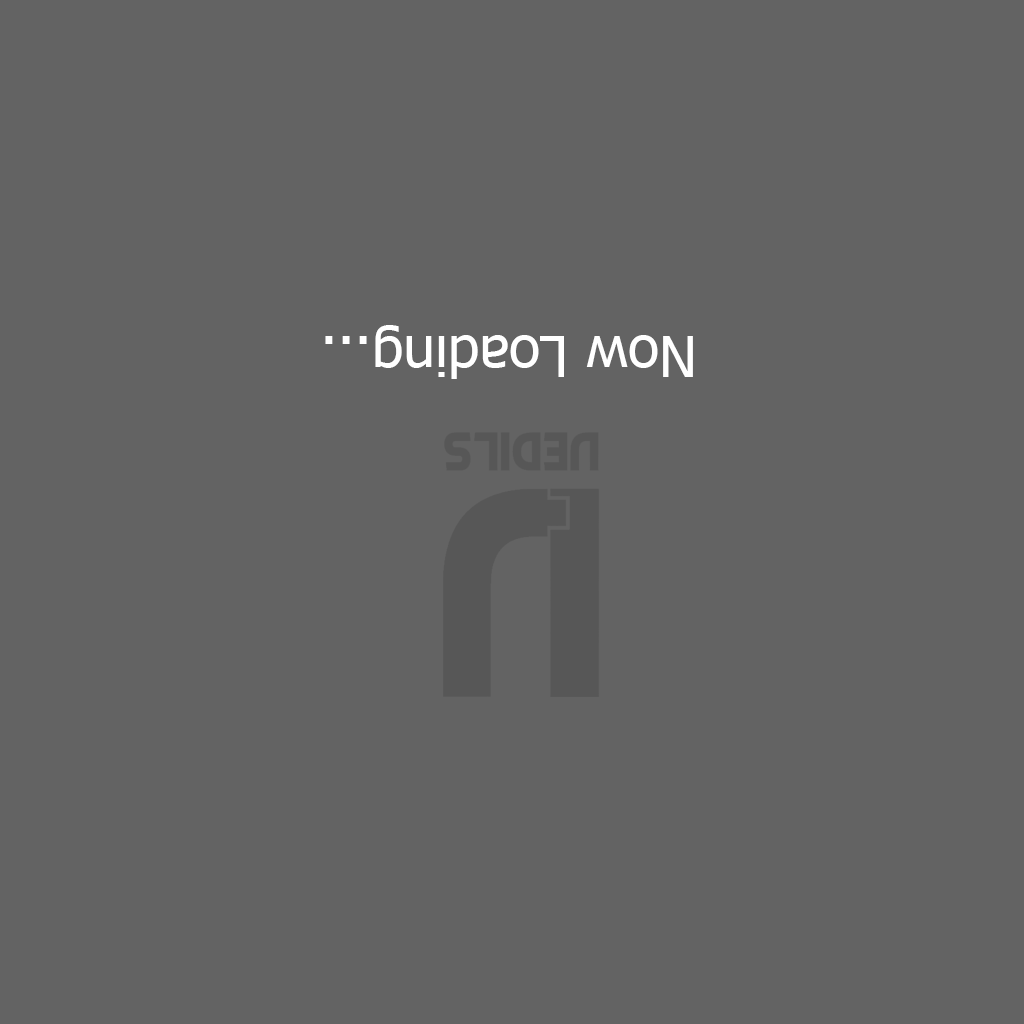
<style>
.page{position:relative;width:1024px;height:1024px;background:#636363}
.page>*{position:absolute;margin:0}
.t1{font:56.8px "Tahoma";color:#ffffff}
</style>
<div class="page">
<p class="t1" style="left:325px;top:325px;width:368px;height:54px;rotate:180deg">Now Loading...</p>
</div>
